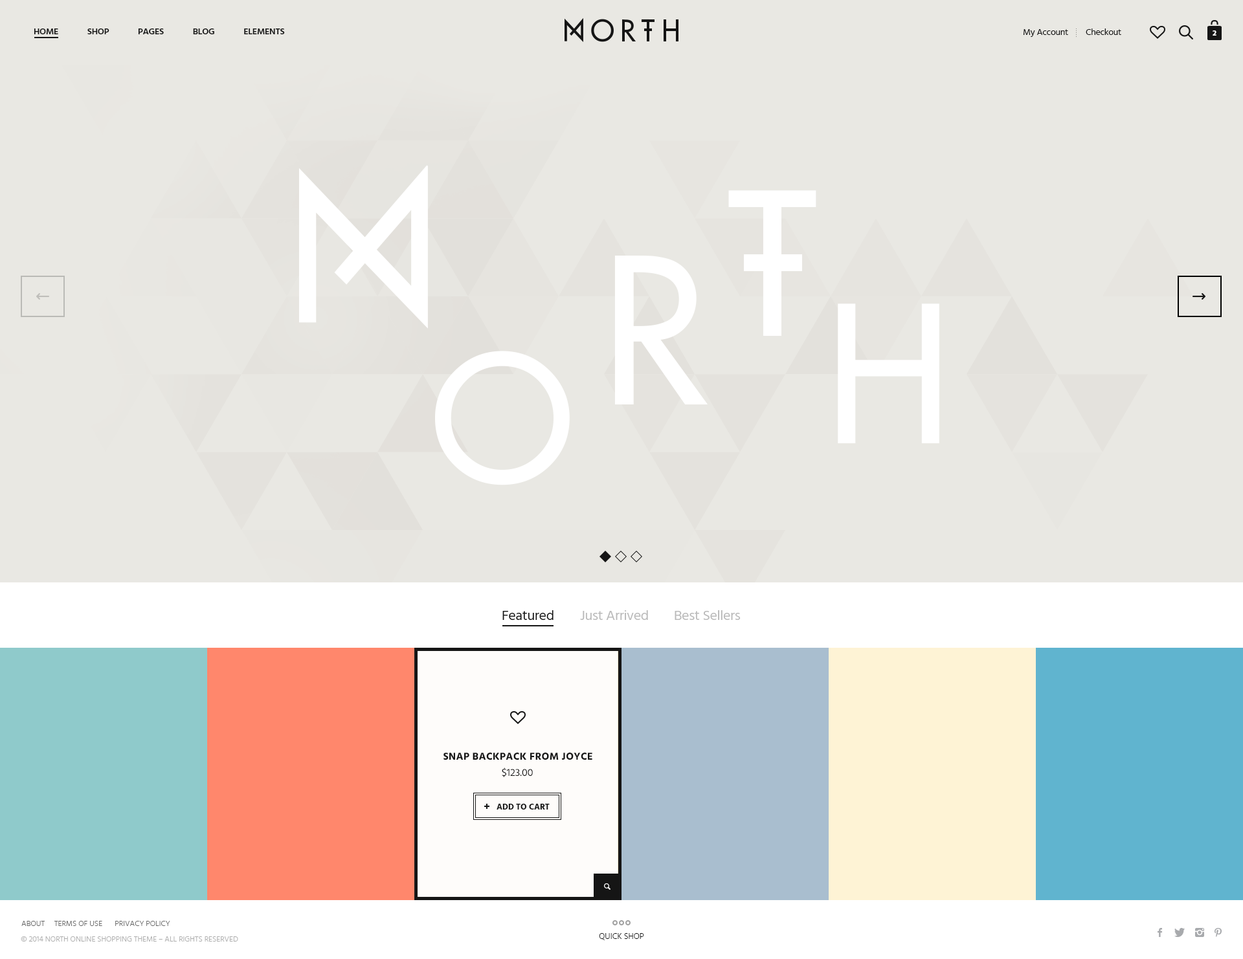
<style>
.page{position:relative;width:1243px;height:959px;background:#e9e8e3}
.page>*{position:absolute;margin:0}
.t1{font:9.1px "Hind-Semibold";letter-spacing:-0.02em;color:#141414;text-transform:uppercase}
.t2{font:9.1px "Hind-Regular";letter-spacing:-0.02em;color:#141414}
.t3{font:7.1px "ArialMT";color:#858481}
.t4{font:7.8px "Hind-Bold";letter-spacing:-0.02em;color:#ffffff;text-transform:uppercase}
.t5{font:193px "FuturaLT";letter-spacing:0.2em;color:#ffffff}
.t6{font:197.4px "FuturaLT";letter-spacing:0.2em;color:#ffffff}
.t7{font:185.1px "FuturaLT";letter-spacing:0.2em;color:#ffffff}
.t8{font:170.1px "FuturaLT";letter-spacing:0.2em;color:#ffffff}
.t9{font:14.2px "Hind-Regular";letter-spacing:-0.02em;color:#151515}
.t10{font:14.2px "Hind-Regular";letter-spacing:-0.02em;color:#bababa}
.t11{font:10.4px "Hind-Bold";letter-spacing:0.02em;color:#151515;text-transform:uppercase}
.t12{font:10.4px "Hind-Regular";color:#151515;text-transform:uppercase}
.t13{font:8.4px "Hind-Bold";color:#151515;text-transform:uppercase}
.t14{font:7.8px "Hind-Light";color:#666666;text-transform:uppercase}
.t15{font:7.8px "Hind-Light";color:#adadad;text-transform:uppercase}
.t16{font:8.4px "Hind-Light";color:#151515;text-transform:uppercase}
</style>
<div class="page">
<p class="t1" style="left:34px;top:28px;width:251px;height:6px">HOME              SHOP              PAGES              BLOG              ELEMENTS</p>
<p class="t2" style="left:1023px;top:29px;width:45px;height:8px">My Account</p>
<p class="t3" style="left:1076px;top:28px;width:1px;height:9px;rotate:-90deg">.....</p>
<p class="t2" style="left:1086px;top:28px;width:35px;height:7px">Checkout</p>
<p class="t4" style="left:1212px;top:30px;width:4px;height:6px">2</p>
<p class="t5" style="left:728px;top:190px;width:88px;height:146px">T</p>
<p class="t6" style="left:614px;top:256px;width:94px;height:149px">R</p>
<p class="t7" style="left:838px;top:304px;width:101px;height:139px">H</p>
<p class="t8" style="left:435px;top:351px;width:135px;height:135px">O</p>
<p class="t9" style="left:502px;top:610px;width:51px;height:10px">Featured</p>
<p class="t10" style="left:580px;top:610px;width:68px;height:10px">Just Arrived</p>
<p class="t10" style="left:675px;top:610px;width:66px;height:10px">Best Sellers</p>
<p class="t11" style="left:443px;top:753px;width:149px;height:8px">Snap Backpack from Joyce</p>
<p class="t12" style="left:502px;top:768px;width:31px;height:9px">$123.00</p>
<p class="t13" style="left:497px;top:804px;width:53px;height:6px">ADD TO CART</p>
<p class="t14" style="left:21px;top:921px;width:24px;height:5px">ABOUT</p>
<p class="t14" style="left:54px;top:921px;width:48px;height:5px">TERMS OF USE</p>
<p class="t14" style="left:115px;top:921px;width:55px;height:5px">PRIVACY POLICY</p>
<p class="t15" style="left:21px;top:937px;width:217px;height:5px">© 2014 NORTH ONLINE SHOPPING THEME – All Rights Reserved</p>
<p class="t16" style="left:599px;top:933px;width:45px;height:8px">QUICK SHOP</p>
</div>
